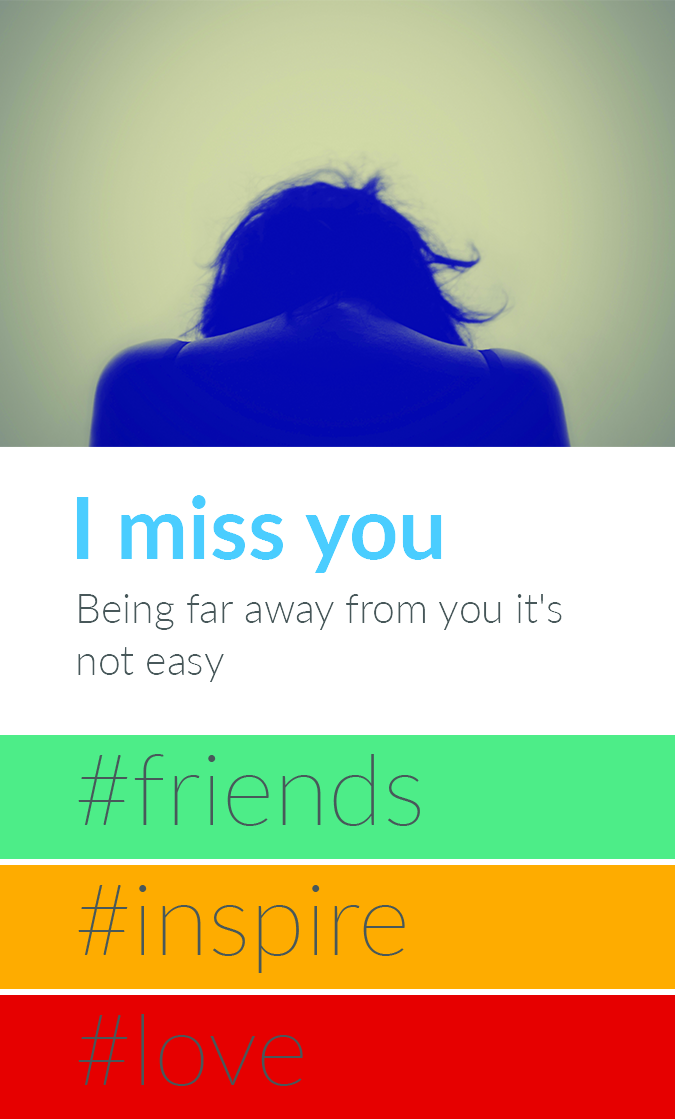
<style>
.page{position:relative;width:675px;height:1119px;background:#ffffff}
.page>*{position:absolute;margin:0}
.t1{font:86px "Lato-Bold";color:#4acdff}
.t2{font:41px/52px "Lato-Light";color:#48585a}
</style>
<div class="page">
<p class="t1" style="left:76px;top:495px;width:366px;height:78px">I miss you</p>
<p class="t2" style="left:78px;top:594px;width:484px;height:88px;text-align:right">Being far away from you it's not easy</p>
</div>
